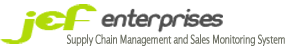
<style>
.page{position:relative;width:300px;height:50px;background:#ffffff}
.page>*{position:absolute;margin:0}
.t1{font:12px "LucidaSans";letter-spacing:-0.075em;color:#73766a;font-weight:bold;scale:0.74 1}
</style>
<div class="page">
<p class="t1" style="left:67px;top:34px;width:218px;height:12px">Supply Chain Management and Sales Monitoring System</p>
</div>
